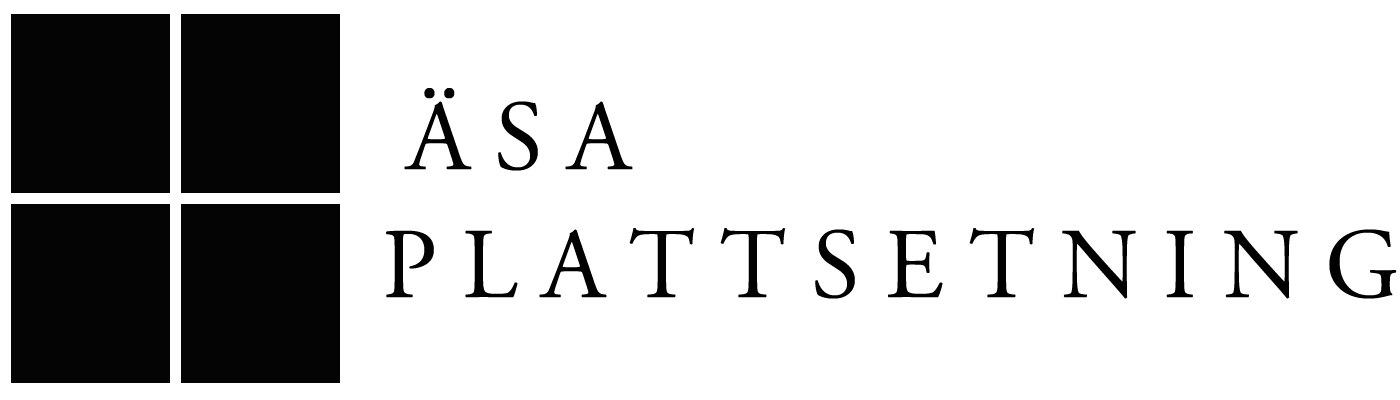
<style>
.page{position:relative;width:1400px;height:400px;background:#ffffff}
.page>*{position:absolute;margin:0}
.t1{font:100px "AGaramond";color:#000000}
</style>
<div class="page">
<p class="t1" style="left:386px;top:88px;width:1011px;height:211px;text-align:right">Ä S A <br>        P L A T T S E T N I N G</p>
</div>
